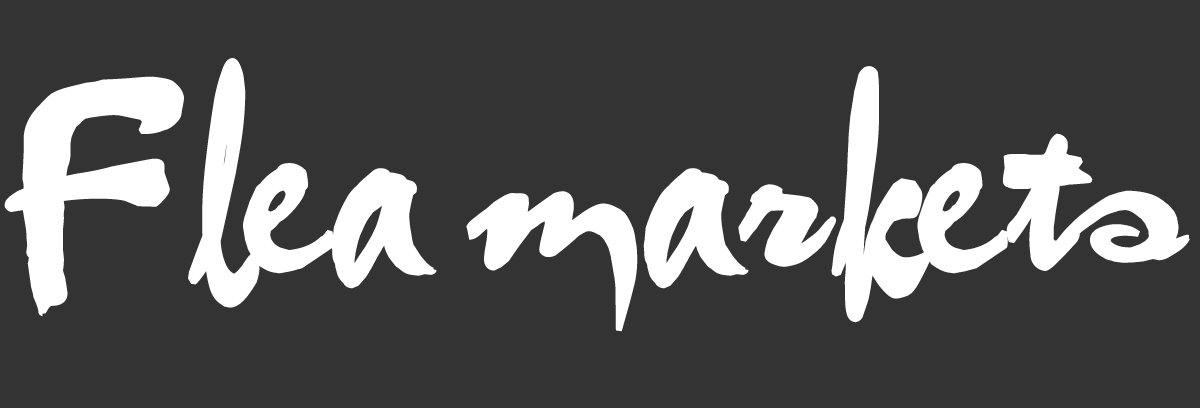
<style>
.page{position:relative;width:1200px;height:408px;background:#333333}
.page>*{position:absolute;margin:0}
.t1{font:210.6px "VNI-Thufap2-Normal";color:#ffffff;font-weight:bold}
</style>
<div class="page">
<p class="t1" style="left:4px;top:58px;width:1186px;height:274px">Flea markets</p>
</div>
